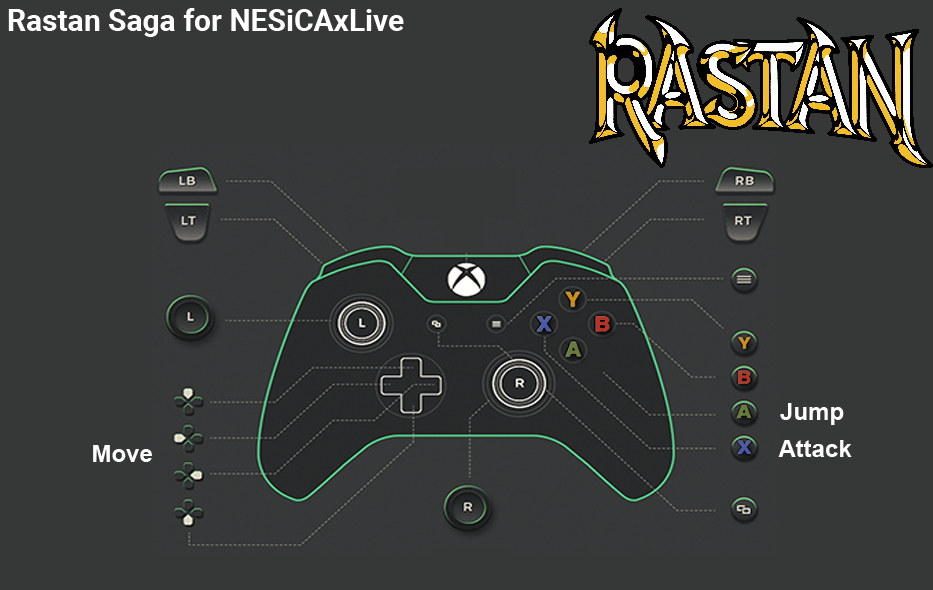
<style>
.page{position:relative;width:933px;height:590px;background:#363838}
.page>*{position:absolute;margin:0}
.t1{font:30px "Roboto-Bold";color:#ffffff}
.t2{font:24px "Arial-BoldMT";color:#fefefe}
</style>
<div class="page">
<p class="t1" style="left:8px;top:8px;width:396px;height:29px">Rastan Saga for NESiCAxLive</p>
<p class="t2" style="left:780px;top:403px;width:64px;height:22px">Jump</p>
<p class="t2" style="left:93px;top:445px;width:59px;height:17px">Move</p>
<p class="t2" style="left:778px;top:440px;width:74px;height:17px">Attack</p>
</div>
